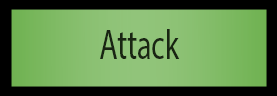
<style>
.page{position:relative;width:277px;height:96px;background:#000000}
.page>*{position:absolute;margin:0}
.t1{font:41.7px "MyriadPro-Regular";color:#192513;scale:0.72 1}
</style>
<div class="page">
<p class="t1" style="left:100px;top:29px;width:80px;height:30px">Attack</p>
</div>
